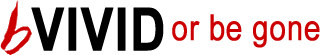
<style>
.page{position:relative;width:323px;height:55px;background:#ffffff}
.page>*{position:absolute;margin:0}
.t1{font:59.3px "ArialNarrow-Bold";color:#000000;font-weight:bold}
.t2{font:35.7px "ArialNarrow";color:#cc0000;font-weight:bold}
</style>
<div class="page">
<p class="t1" style="left:31px;top:7px;width:133px;height:44px">VIVID</p>
<p class="t2" style="left:172px;top:14px;width:148px;height:34px">or be gone</p>
</div>
